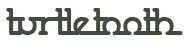
<style>
.page{position:relative;width:187px;height:42px;background:#ffffff}
.page>*{position:absolute;margin:0}
.t1{font:36px "PowderworksBRK";color:#434b40}
</style>
<div class="page">
<p class="t1" style="left:6px;top:8px;width:177px;height:27px">turtletooth</p>
</div>
